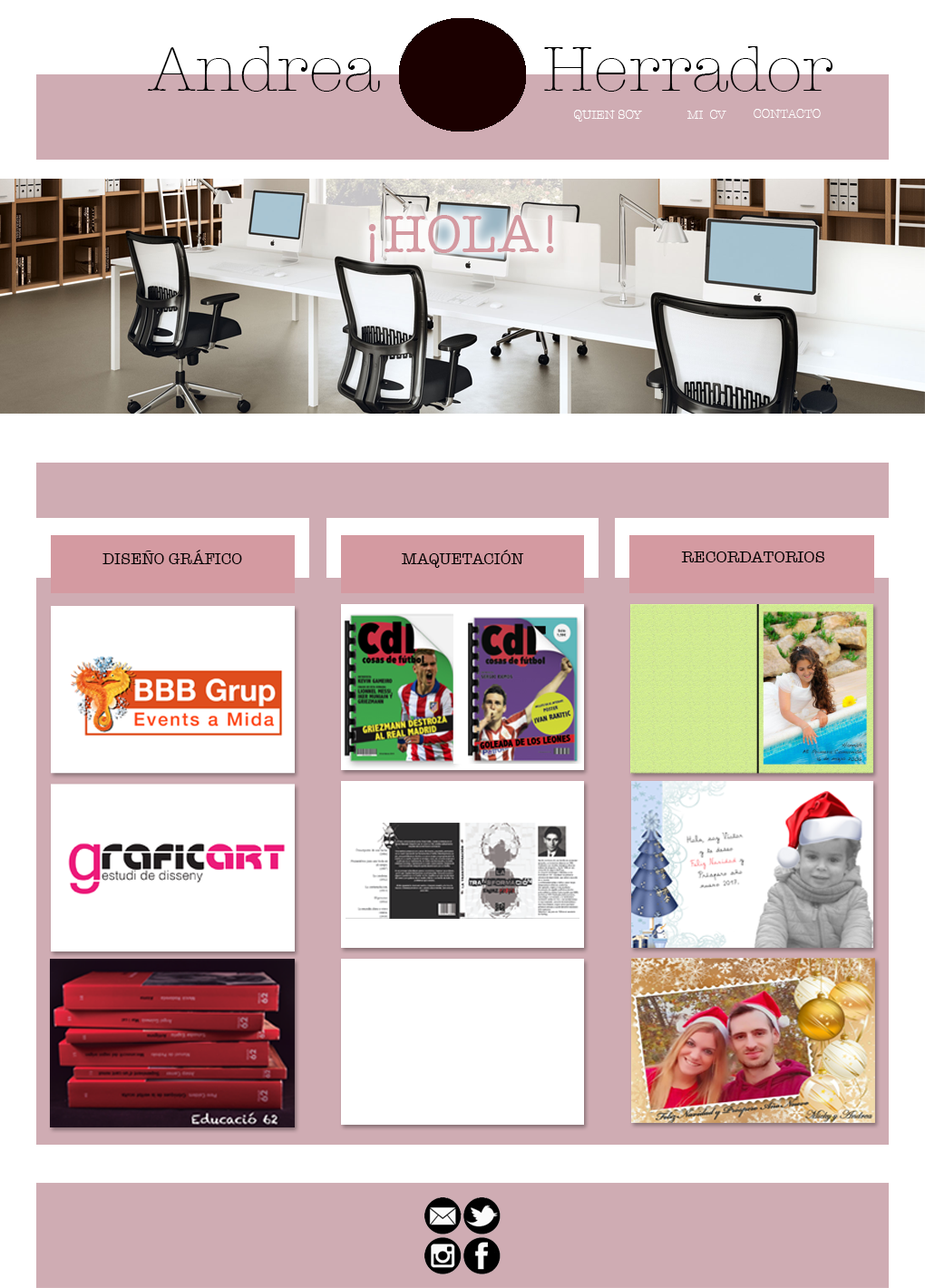
<style>
.page{position:relative;width:925px;height:1288px;background:#ffffff}
.page>*{position:absolute;margin:0}
.t1{font:65.3px "AmericanTypewriter-Light";color:#000000}
.t2{font:65.3px "AmericanTypewriter-Light";color:#d49aa1}
.t3{font:12.7px "AmericanTypewriter-Light";color:#ffffff}
.t4{font:54.4px "AmericanTypewriter";color:#d49aa1}
.t5{font:16.3px "AmericanTypewriter";color:#000000}
.t6{font:16.3px "AmericanTypewriter";color:#000000;scale:1.04 1}
</style>
<div class="page">
<p class="t1" style="left:147px;top:46px;width:687px;height:46px"><span class="t2">                 </span>Andrea          Herrador</p>
<p class="t3" style="left:574px;top:110px;width:68px;height:12px">QUIEN SOY</p>
<p class="t3" style="left:688px;top:110px;width:39px;height:9px">MI  CV</p>
<p class="t3" style="left:754px;top:109px;width:67px;height:9px">CONTACTO</p>
<p class="t4" style="left:368px;top:215px;width:186px;height:47px">¡HOLA!</p>
<p class="t5" style="left:103px;top:550px;width:139px;height:14px">DISEÑO GRÁFICO</p>
<p class="t5" style="left:402px;top:550px;width:122px;height:18px">MAQUETACIÓN</p>
<p class="t6" style="left:681px;top:552px;width:145px;height:11px">RECORDATORIOS</p>
</div>
